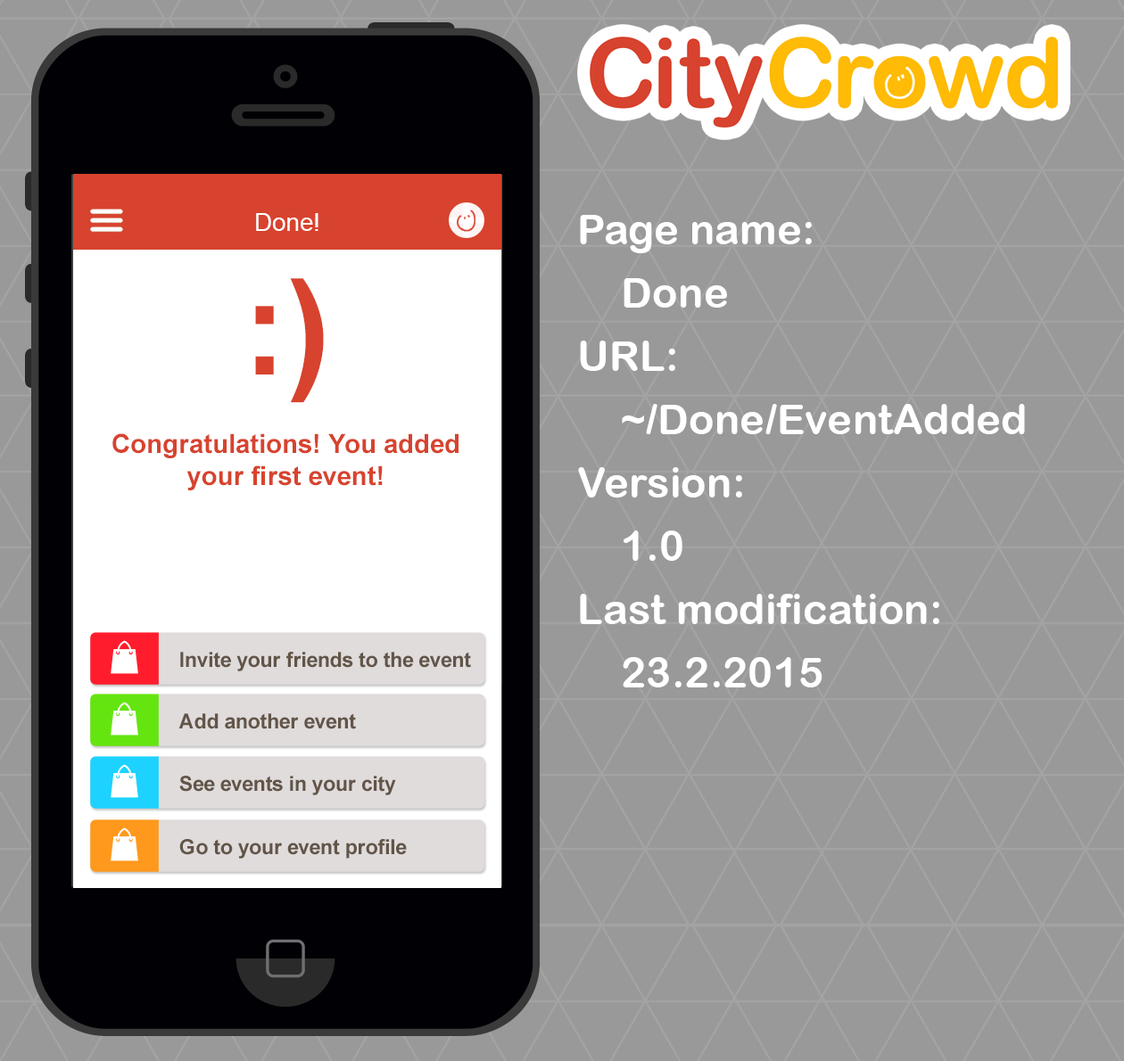
<style>
.page{position:relative;width:1124px;height:1061px;background:#999999}
.page>*{position:absolute;margin:0}
.t1{font:24.6px "ArialMT";color:#ffffff}
.t2{font:42.2px/63.3px "ArialRoundedMTBold";color:#ffffff}
.t3{font:26.4px/79.1px "Arial-BoldMT";color:#d7432e}
.t4{font:131.9px/79.1px "Arial-BoldMT";color:#d7432e}
.t5{font:26.4px "Arial-BoldMT";color:#d7432e}
.t6{font:20.8px "Arial-BoldMT";color:#625548}
</style>
<div class="page">
<p class="t1" style="left:256px;top:213px;width:62px;height:18px">Done!</p>
<p class="t2" style="left:578px;top:215px;width:447px;height:473px">Page name:<br>Done<br>URL:<br>~/Done/EventAdded<br>Version:<br>1.0<br>Last modification:<br>23.2.2015</p>
<p class="t3" style="left:112px;top:278px;width:346px;height:212px;text-align:center"><span class="t4">:)<br></span>Congratulations! You added<br><span class="t5">your first event!</span></p>
<p class="t6" style="left:180px;top:652px;width:291px;height:20px">Invite your friends to the event</p>
<p class="t6" style="left:178px;top:713px;width:178px;height:16px">Add another event</p>
<p class="t6" style="left:179px;top:776px;width:217px;height:19px">See events in your city</p>
<p class="t6" style="left:179px;top:839px;width:228px;height:20px">Go to your event profile</p>
</div>
